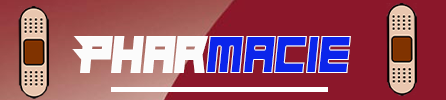
<style>
.page{position:relative;width:446px;height:100px;background:#8b172a}
.page>*{position:absolute;margin:0}
.t1{font:54.2px "Hindsight2020";color:#fbfbfb;scale:0.92 1}
.t2{font:54.2px "Hindsight2020";color:#0b25eb;scale:0.92 1}
</style>
<div class="page">
<p class="t1" style="left:72px;top:36px;width:137px;height:37px">Phar</p>
<p class="t2" style="left:206px;top:36px;width:145px;height:37px">macie</p>
</div>
